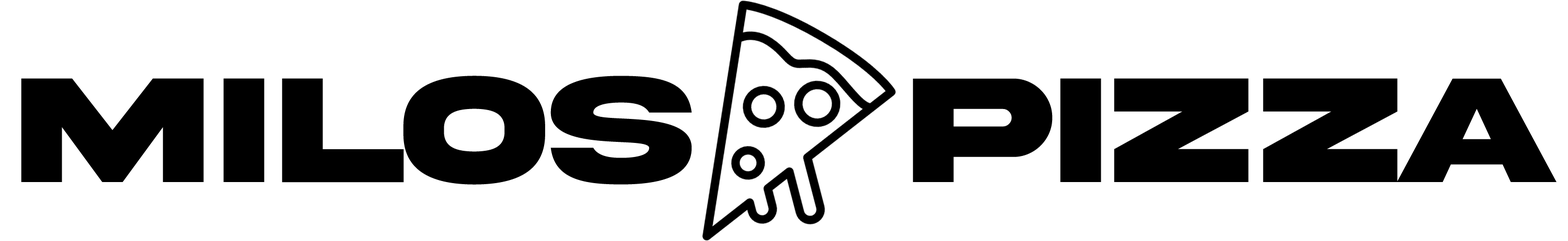
<style>
.page{position:relative;width:1568px;height:241px;background:#ffffff}
.page>*{position:absolute;margin:0}
.t1{font:158px "AkiraExpanded-SuperBold";letter-spacing:-0.02em;color:#000000;text-transform:uppercase}
</style>
<div class="page">
<p class="t1" style="left:21px;top:76px;width:1536px;height:109px">MILOS   PIZZA</p>
</div>
